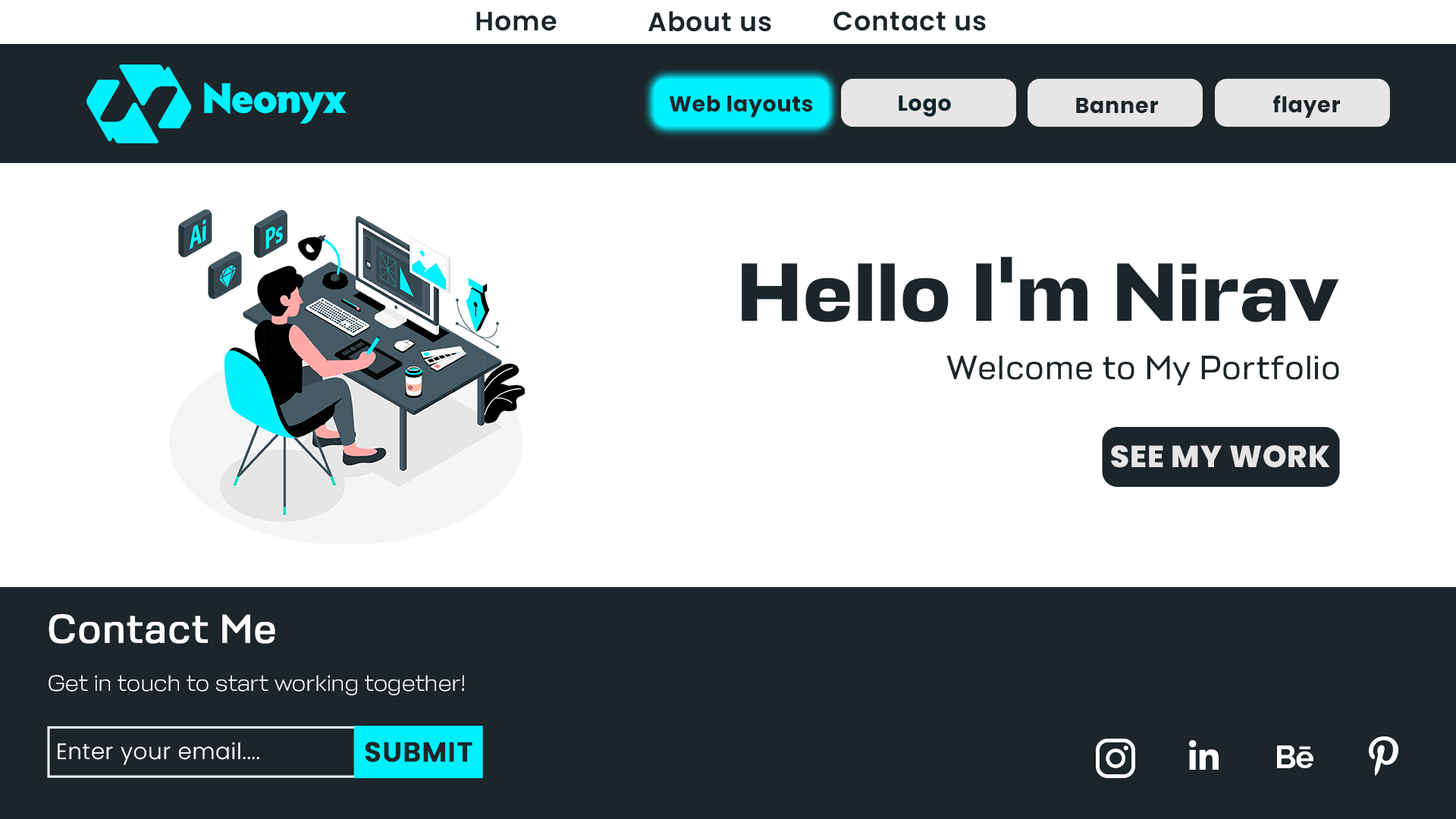
<style>
.page{position:relative;width:1456px;height:819px;background:#ffffff}
.page>*{position:absolute;margin:0}
.t1{font:26.5px "Poppins-SemiBold";letter-spacing:0.025em;color:#1c2529}
.t2{font:21.6px "Poppins-Bold";letter-spacing:0.025em;color:#1c2529}
.t3{font:21.6px "Poppins-Bold";letter-spacing:0.025em;color:#012529}
.t4{font:83.1px "Stapel-Bold";letter-spacing:0.025em;color:#1c2529}
.t5{font:34px "StapelText-Regular";letter-spacing:0.025em;color:#1c2529}
.t6{font:30.4px "Poppins-ExtraBold";letter-spacing:0.025em;color:#e7e5e5}
.t7{font:40px "StapelText-Regular";letter-spacing:0.025em;color:#ffffff;font-weight:bold}
.t8{font:22.2px "Stapel-Light";letter-spacing:0.025em;color:#ffffff}
.t9{font:22.2px "Poppins-Light";letter-spacing:0.025em;color:#ffffff}
.t10{font:27.5px "Poppins-SemiBold";letter-spacing:0.025em;color:#1c2529;font-weight:bold}
</style>
<div class="page">
<p class="t1" style="left:476px;top:11px;width:81px;height:20px">Home</p>
<p class="t1" style="left:648px;top:11px;width:123px;height:21px">About us</p>
<p class="t1" style="left:833px;top:11px;width:153px;height:20px">Contact us</p>
<p class="t2" style="left:669px;top:96px;width:144px;height:22px">Web layouts</p>
<p class="t3" style="left:899px;top:96px;width:52px;height:21px">Logo</p>
<p class="t2" style="left:1076px;top:98px;width:82px;height:16px">Banner</p>
<p class="t2" style="left:1273px;top:95px;width:67px;height:23px">flayer</p>
<p class="t4" style="left:742px;top:256px;width:597px;height:66px">Hello I'm Nirav</p>
<p class="t5" style="left:946px;top:356px;width:393px;height:30px">Welcome to My Portfolio</p>
<p class="t6" style="left:1111px;top:445px;width:219px;height:23px">SEE MY WORK</p>
<p class="t7" style="left:49px;top:613px;width:226px;height:31px">Contact Me</p>
<p class="t8" style="left:49px;top:675px;width:415px;height:20px">Get in touch to start working together!</p>
<p class="t9" style="left:58px;top:742px;width:201px;height:23px">Enter your email....</p>
<p class="t10" style="left:365px;top:742px;width:107px;height:20px">SUBMIT</p>
</div>
